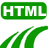
<style>
.page{position:relative;width:48px;height:48px;background:#ffffff}
.page>*{position:absolute;margin:0}
.t1{font:14px "Arial-Black";color:#ffffff}
</style>
<div class="page">
<p class="t1" style="left:3px;top:6px;width:44px;height:10px">HTML</p>
</div>
